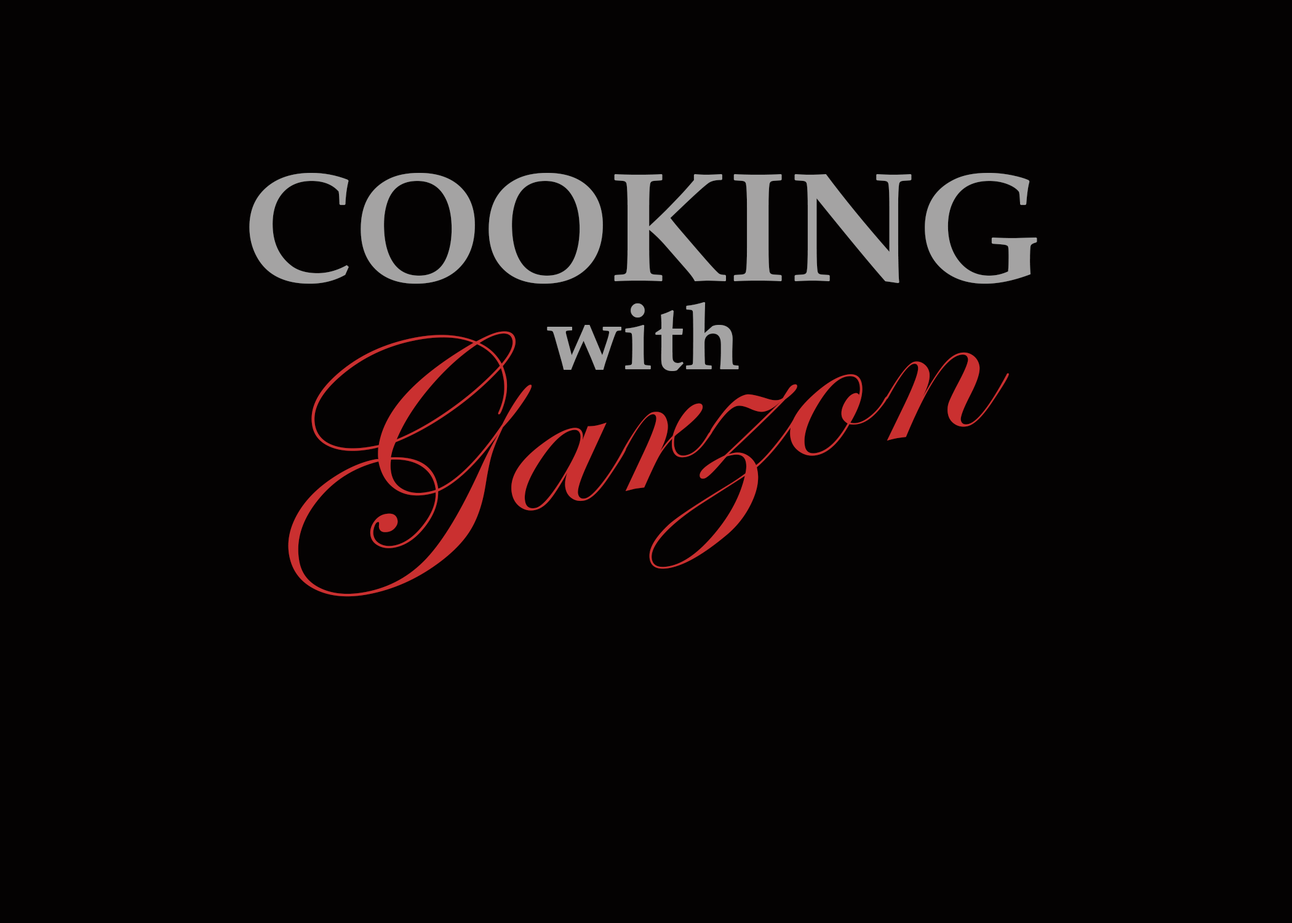
<style>
.page{position:relative;width:1292px;height:923px;background:#040202}
.page>*{position:absolute;margin:0}
.t1{font:153.8px "PalatinoLinotype-Bold";color:#a4a3a3}
.t2{font:92.3px "PalatinoLinotype-Bold";color:#a4a3a3}
.t3{font:265.3px "EdwardianScriptITC";color:#ca3030;scale:1.19 1}
</style>
<div class="page">
<p class="t1" style="left:249px;top:173px;width:788px;height:111px">COOKING</p>
<p class="t2" style="left:547px;top:302px;width:192px;height:69px">with</p>
<p class="t3" style="left:288px;top:331px;width:721px;height:266px;rotate:-11deg">Garzon</p>
</div>
